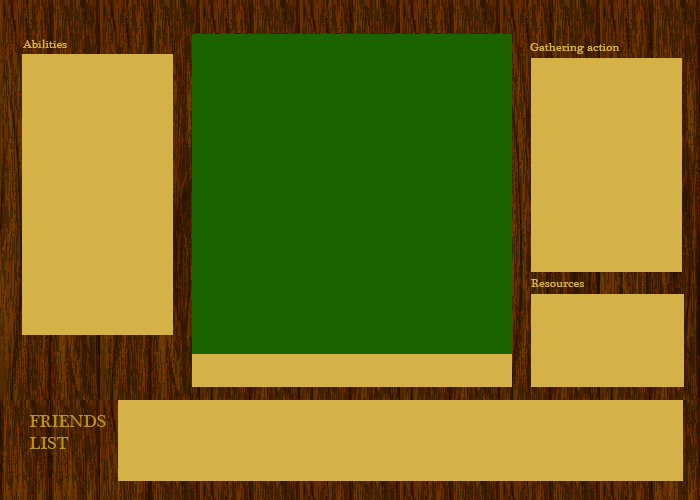
<style>
.page{position:relative;width:700px;height:500px;background:#d5b248}
.page>*{position:absolute;margin:0}
.t1{font:12px "PlantagenetCherokee";color:#d5b248}
.t2{font:18px "PlantagenetCherokee";color:#ba931c}
</style>
<div class="page">
<p class="t1" style="left:22px;top:39px;width:45px;height:10px">Abilities</p>
<p class="t1" style="left:530px;top:43px;width:90px;height:11px">Gathering action</p>
<p class="t1" style="left:531px;top:279px;width:54px;height:8px">Resources</p>
<p class="t2" style="left:29px;top:415px;width:77px;height:34px">FRIENDS<br>LIST</p>
</div>
